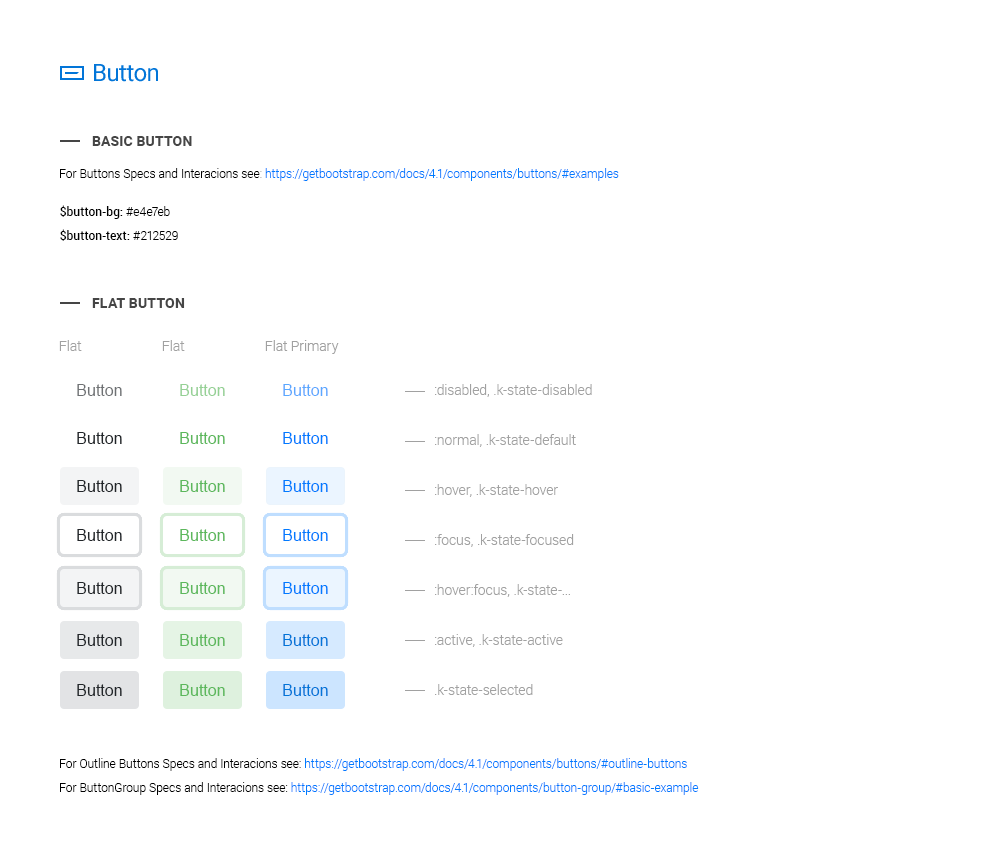
<style>
.page{position:relative;width:1000px;height:850px;background:#ffffff}
.page>*{position:absolute;margin:0}
.t1{font:24px "Roboto-Regular";letter-spacing:-0.025em;color:#0275d8}
.t2{font:14px "Roboto-Bold";letter-spacing:0.01em;color:#454545;text-transform:uppercase}
.t3{font:12px "Roboto-Light";color:#007bff}
.t4{font:12px "Roboto-Light";color:#000000}
.t5{font:12px "Roboto-Light";color:#a1a1a1}
.t6{font:12px/24px "Roboto-Medium";color:#000000}
.t7{font:12px/24px "Roboto-Light";color:#000000}
.t8{font:14px "Roboto-Light";color:#a1a1a1}
.t9{font:16px "ArialMT";color:#6e7174}
.t10{font:16px "ArialMT";color:#95d195}
.t11{font:16px "ArialMT";color:#59a9ff}
.t12{font:14px/50px "Roboto-Light";color:#a1a1a1}
.t13{font:16px "ArialMT";color:#212529}
.t14{font:16px "ArialMT";color:#5cb85c}
.t15{font:16px "ArialMT";color:#007bff}
.t16{font:16px "ArialMT";color:#0275d8}
.t17{font:12px/24px "Roboto-Light";color:#007bff}
</style>
<div class="page">
<p class="t1" style="left:94px;top:64px;width:64px;height:18px">Button</p>
<p class="t2" style="left:92px;top:136px;width:100px;height:10px">Basic button</p>
<p class="t3" style="left:60px;top:168px;width:559px;height:13px"><span class="t4">For Buttons Specs and Interacions see</span><span class="t5">: </span>https://getbootstrap.com/docs/4.1/components/buttons/#examples</p>
<p class="t6" style="left:60px;top:205px;width:118px;height:36px">$button-bg:<span class="t7"> #e4e7eb<br></span>$button-text: <span class="t7">#212529</span></p>
<p class="t2" style="left:92px;top:298px;width:93px;height:10px">Flat Button</p>
<p class="t8" style="left:59px;top:340px;width:23px;height:11px">Flat</p>
<p class="t8" style="left:162px;top:340px;width:23px;height:11px">Flat</p>
<p class="t8" style="left:265px;top:340px;width:74px;height:14px">Flat Primary</p>
<p class="t9" style="left:77px;top:384px;width:45px;height:12px">Button</p>
<p class="t10" style="left:180px;top:384px;width:45px;height:12px">Button</p>
<p class="t11" style="left:283px;top:384px;width:45px;height:12px">Button</p>
<p class="t12" style="left:435px;top:384px;width:157px;height:311px">:disabled, .k-state-disabled<br>:normal, .k-state-default<br>:hover, .k-state-hover<br>:focus, .k-state-focused<br>:hover:focus, .k-state-...<br>:active, .k-state-active<br>.k-state-selected</p>
<p class="t13" style="left:77px;top:432px;width:45px;height:12px">Button</p>
<p class="t14" style="left:180px;top:432px;width:45px;height:12px">Button</p>
<p class="t15" style="left:283px;top:432px;width:45px;height:12px">Button</p>
<p class="t13" style="left:77px;top:480px;width:45px;height:12px">Button</p>
<p class="t14" style="left:180px;top:480px;width:45px;height:12px">Button</p>
<p class="t15" style="left:283px;top:480px;width:45px;height:12px">Button</p>
<p class="t13" style="left:77px;top:529px;width:45px;height:12px">Button</p>
<p class="t14" style="left:180px;top:529px;width:45px;height:12px">Button</p>
<p class="t15" style="left:283px;top:529px;width:45px;height:12px">Button</p>
<p class="t13" style="left:77px;top:582px;width:45px;height:12px">Button</p>
<p class="t14" style="left:180px;top:582px;width:45px;height:12px">Button</p>
<p class="t15" style="left:283px;top:582px;width:45px;height:12px">Button</p>
<p class="t13" style="left:77px;top:634px;width:45px;height:12px">Button</p>
<p class="t14" style="left:180px;top:634px;width:45px;height:12px">Button</p>
<p class="t16" style="left:283px;top:634px;width:45px;height:12px">Button</p>
<p class="t13" style="left:77px;top:684px;width:45px;height:12px">Button</p>
<p class="t14" style="left:180px;top:684px;width:45px;height:12px">Button</p>
<p class="t16" style="left:283px;top:684px;width:45px;height:12px">Button</p>
<p class="t17" style="left:60px;top:758px;width:639px;height:37px"><span class="t7">For Outline Buttons Specs and Interacions see: </span>https://getbootstrap.com/docs/4.1/components/buttons/#outline-buttons<br><span class="t7">For ButtonGroup Specs and Interacions see: </span>https://getbootstrap.com/docs/4.1/components/button-group/#basic-example</p>
</div>
